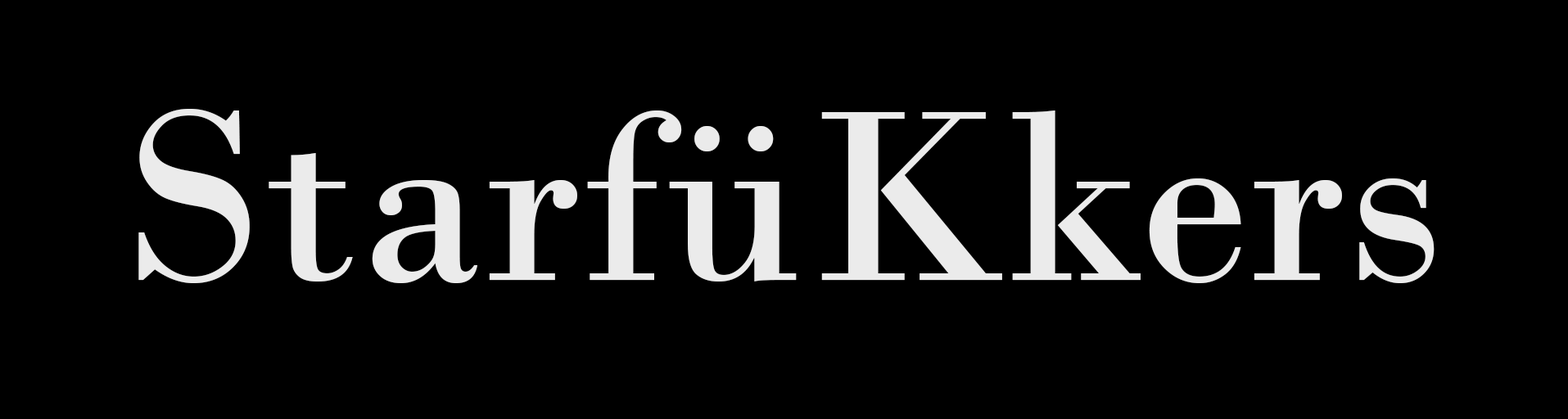
<style>
.page{position:relative;width:1568px;height:419px;background:#000000}
.page>*{position:absolute;margin:0}
.t1{font:256.5px "BodoniMT";color:#ebebeb}
</style>
<div class="page">
<p class="t1" style="left:138px;top:109px;width:1297px;height:174px">StarfüKkers</p>
</div>
